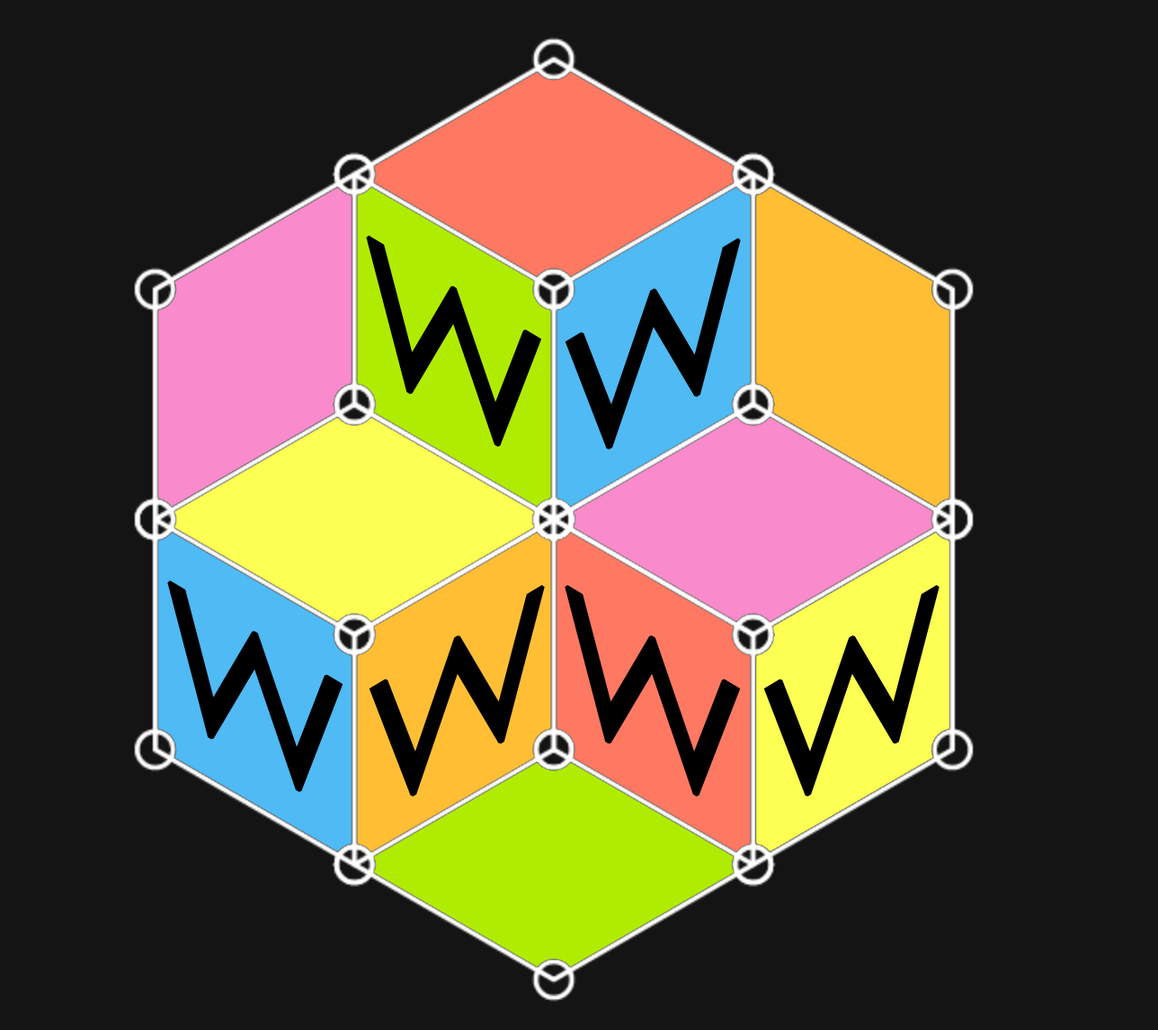
<style>
.page{position:relative;width:1158px;height:1030px;background:#141414}
.page>*{position:absolute;margin:0}
.t1{font:181px "CenturyGothic";letter-spacing:0.01em;color:#000000;font-weight:bold;scale:1.27 1}
</style>
<div class="page">
<p class="t1" style="left:366px;top:235px;width:176px;height:212px;rotate:31deg">W</p>
</div>
